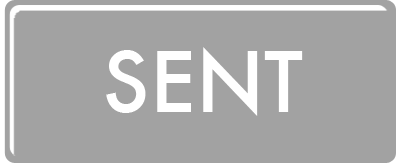
<style>
.page{position:relative;width:400px;height:163px;background:#a2a2a2}
.page>*{position:absolute;margin:0}
.t1{font:81.3px "Futura-Medium";color:#ffffff;text-transform:uppercase}
</style>
<div class="page">
<p class="t1" style="left:106px;top:47px;width:197px;height:69px">sent</p>
</div>
